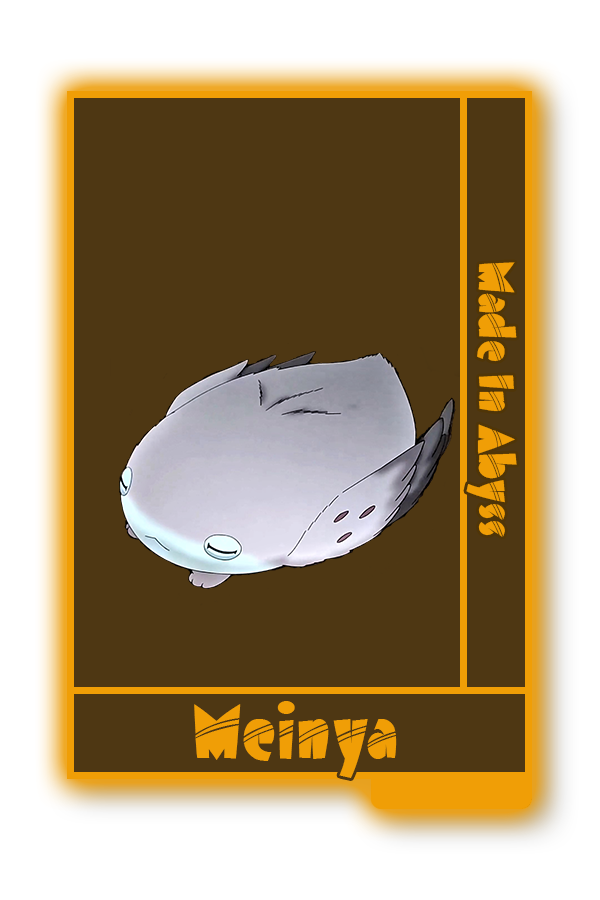
<style>
.page{position:relative;width:600px;height:900px;background:#4e3713}
.page>*{position:absolute;margin:0}
.t1{font:48.8px "AirmoleStripe";color:#f09e06}
.t2{font:75px "AirmoleStripe";color:#f09e06}
</style>
<div class="page">
<p class="t1" style="left:466px;top:262px;width:51px;height:275px;rotate:90deg">Made In Abyss</p>
<p class="t2" style="left:194px;top:701px;width:203px;height:77px">Meinya</p>
</div>
